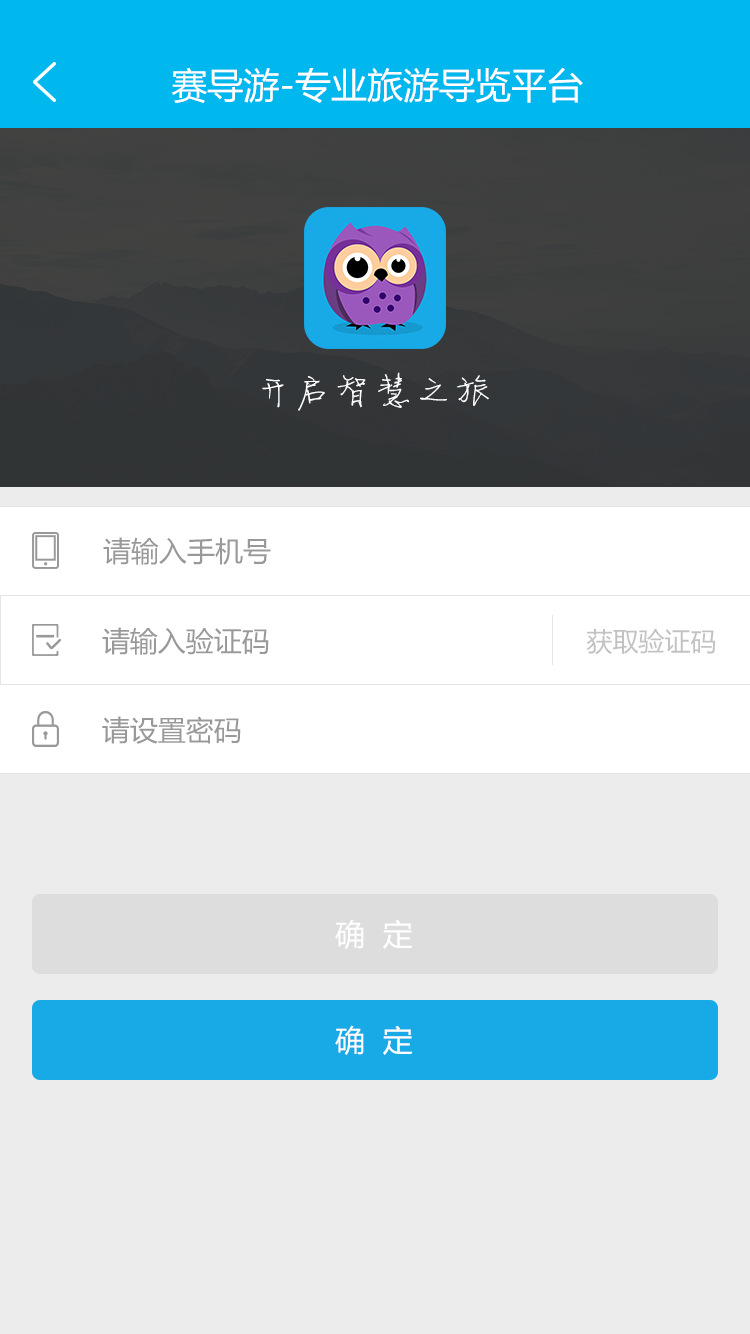
<style>
.page{position:relative;width:750px;height:1334px;background:#ececec}
.page>*{position:absolute;margin:0}
.t1{font:36px "MicrosoftYaHei";color:#ffffff}
.t2{font:40px "FZJLJW--GB1-0";color:#ffffff}
.t3{font:28px "MicrosoftYaHei";color:#999999}
.t4{font:26px "MicrosoftYaHei";color:#c2c2c2}
.t5{font:30px "MicrosoftYaHei";color:#ffffff}
</style>
<div class="page">
<p class="t1" style="left:171px;top:67px;width:412px;height:36px">赛导游-专业旅游导览平台</p>
<p class="t2" style="left:262px;top:372px;width:227px;height:39px">开启智慧之旅</p>
<p class="t3" style="left:103px;top:537px;width:168px;height:28px">请输入手机号</p>
<p class="t3" style="left:102px;top:627px;width:167px;height:28px">请输入验证码</p>
<p class="t4" style="left:586px;top:629px;width:130px;height:26px">获取验证码</p>
<p class="t3" style="left:102px;top:716px;width:139px;height:28px">请设置密码</p>
<p class="t5" style="left:335px;top:919px;width:78px;height:30px">确  定</p>
<p class="t5" style="left:335px;top:1025px;width:78px;height:30px">确  定</p>
</div>
